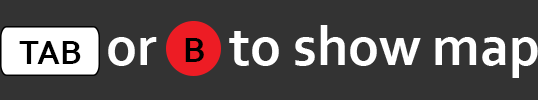
<style>
.page{position:relative;width:538px;height:100px;background:#333333}
.page>*{position:absolute;margin:0}
.t1{font:56px "Corbel-Bold";color:#ffffff}
.t2{font:35px "Corbel-Bold";color:#000000}
.t3{font:36px "Corbel-Bold";color:#000000}
</style>
<div class="page">
<p class="t1" style="left:229px;top:25px;width:309px;height:53px">to show map</p>
<p class="t2" style="left:19px;top:41px;width:62px;height:23px">TAB</p>
<p class="t1" style="left:108px;top:37px;width:49px;height:29px">or</p>
<p class="t3" style="left:185px;top:38px;width:19px;height:24px">B</p>
</div>
